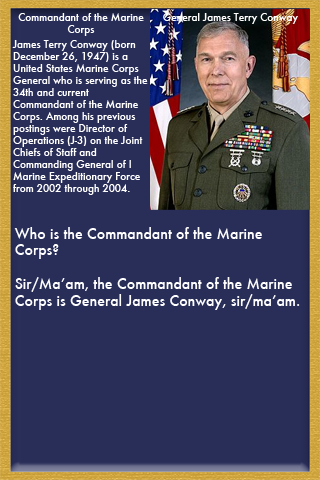
<style>
.page{position:relative;width:320px;height:480px;background:#292e59}
.page>*{position:absolute;margin:0}
.t1{font:10px "Futura-Medium";color:#ffffff}
.t2{font:14px "Futura-Medium";color:#ffffff}
</style>
<div class="page">
<p class="t1" style="left:18px;top:13px;width:126px;height:23px;text-align:center">Commandant of the Marine<br>Corps</p>
<p class="t1" style="left:163px;top:13px;width:135px;height:11px">General James Terry Conway</p>
<p class="t1" style="left:12px;top:40px;width:136px;height:155px">James Terry Conway (born <br>December 26, 1947) is a <br>United States Marine Corps <br>General who is serving as the <br>34th and current <br>Commandant of the Marine <br>Corps. Among his previous <br>postings were Director of <br>Operations (J-3) on the Joint <br>Chiefs of Staff and <br>Commanding General of I <br>Marine Expeditionary Force <br>from 2002 through 2004.</p>
<p class="t2" style="left:14px;top:227px;width:286px;height:83px">Who is the Commandant of the Marine <br>Corps?<br><br>Sir/Ma’am, the Commandant of the Marine <br>Corps is General James Conway, sir/ma’am.</p>
</div>
